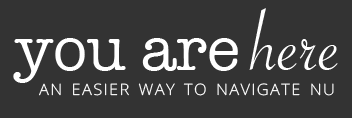
<style>
.page{position:relative;width:352px;height:118px;background:#333333}
.page>*{position:absolute;margin:0}
.t1{font:62.5px "AmericanTypewriter";color:#ffffff}
.t2{font:90.3px "SavoyeLetPlain";color:#ffffff}
.t3{font:22.4px "OpenSans-Light";letter-spacing:0.08em;color:#ffffff;font-variant:small-caps;scale:1.05 1}
</style>
<div class="page">
<p class="t1" style="left:13px;top:8px;width:325px;height:75px">you are <span class="t2">here</span></p>
<p class="t3" style="left:39px;top:83px;width:295px;height:13px">an easier way to navigate nu</p>
</div>
